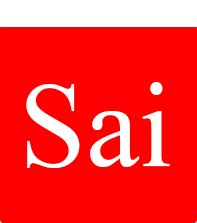
<style>
.page{position:relative;width:197px;height:223px;background:#ff0000}
.page>*{position:absolute;margin:0}
.t1{font:120px "TimesNewRomanPSMT";color:#ffffff}
</style>
<div class="page">
<p class="t1" style="left:26px;top:82px;width:144px;height:86px">Sai</p>
</div>
